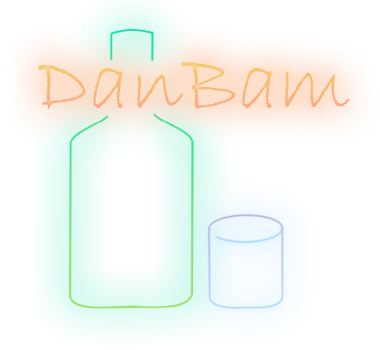
<style>
.page{position:relative;width:380px;height:350px;background:#ffffff}
.page>*{position:absolute;margin:0}
.t1{font:83.3px "BradleyHandITC";color:#f9b977}
</style>
<div class="page">
<p class="t1" style="left:38px;top:62px;width:312px;height:47px">DanBam</p>
</div>
